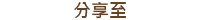
<style>
.page{position:relative;width:198px;height:20px;background:#ffffff}
.page>*{position:absolute;margin:0}
.t1{font:18px "MicrosoftJhengHeiBold";color:#684121}
</style>
<div class="page">
<p class="t1" style="left:74px;top:2px;width:52px;height:17px">分享至</p>
</div>
